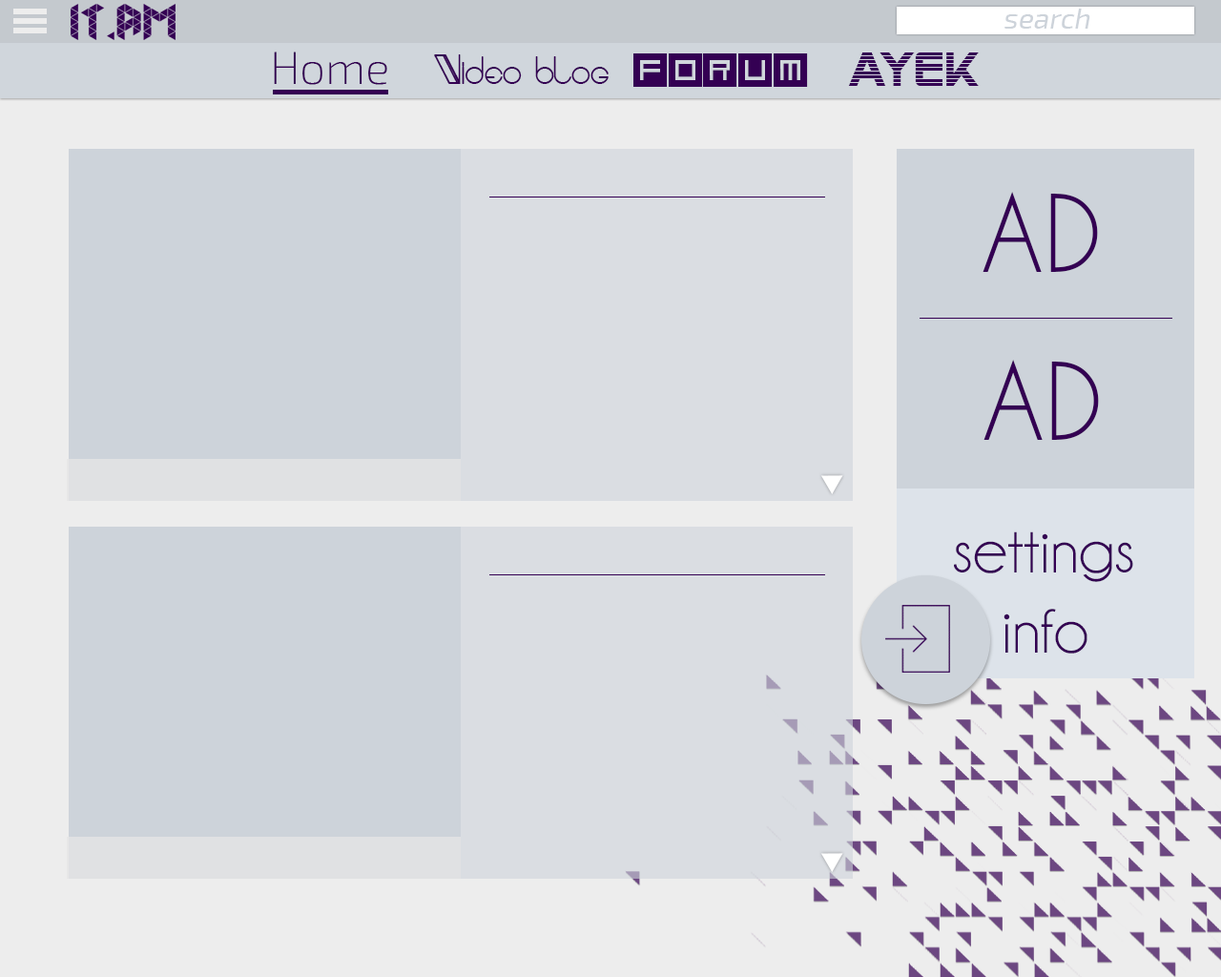
<style>
.page{position:relative;width:1221px;height:977px;background:#cdd3da}
.page>*{position:absolute;margin:0}
.t1{font:28.6px "Exo2-Regular";color:#cdd3da;font-style:italic}
.t2{font:22.9px "Exo2-ExtraLight";color:#cdd3da}
.t3{font:44.8px "Exo2-ExtraLight";color:#340053}
.t4{font:50.6px "Qubix";color:#340053}
.t5{font:47.7px "SFAlienEncounters";color:#340053}
.t6{font:56.3px "AracmeWaroundLight";color:#340053}
.t7{font:100.2px "CaviarDreams";color:#340053}
.t8{font:100.2px "MyriadPro-Regular";color:#340053}
.t9{font:100.2px "MyriadPro-Regular";color:#000000}
.t10{font:66.8px "Champagne&Limousines";color:#340053}
</style>
<div class="page">
<p class="t1" style="left:1003px;top:9px;width:87px;height:20px"><span class="t2">                     </span>search</p>
<p class="t3" style="left:274px;top:52px;width:113px;height:33px">Home</p>
<p class="t4" style="left:633px;top:53px;width:175px;height:34px">Forum</p>
<p class="t5" style="left:848px;top:52px;width:131px;height:34px">ayek</p>
<p class="t6" style="left:434px;top:54px;width:175px;height:30px">Video blog</p>
<p class="t7" style="left:982px;top:192px;width:116px;height:80px"><span class="t8">  </span>AD</p>
<p class="t7" style="left:983px;top:360px;width:116px;height:80px"><span class="t9">  </span>AD</p>
<p class="t10" style="left:954px;top:531px;width:179px;height:122px">settings<br>    info</p>
</div>
